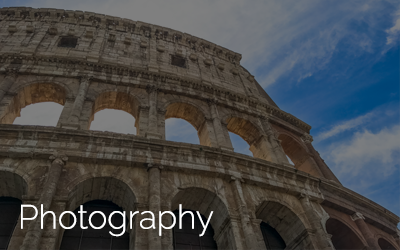
<style>
.page{position:relative;width:400px;height:250px}
.page>*{position:absolute;margin:0}
.t1{font:33.3px "Raleway-Light";color:#ffffff}
</style>
<div class="page">
<p class="t1" style="left:21px;top:204px;width:193px;height:33px">Photography</p>
</div>
